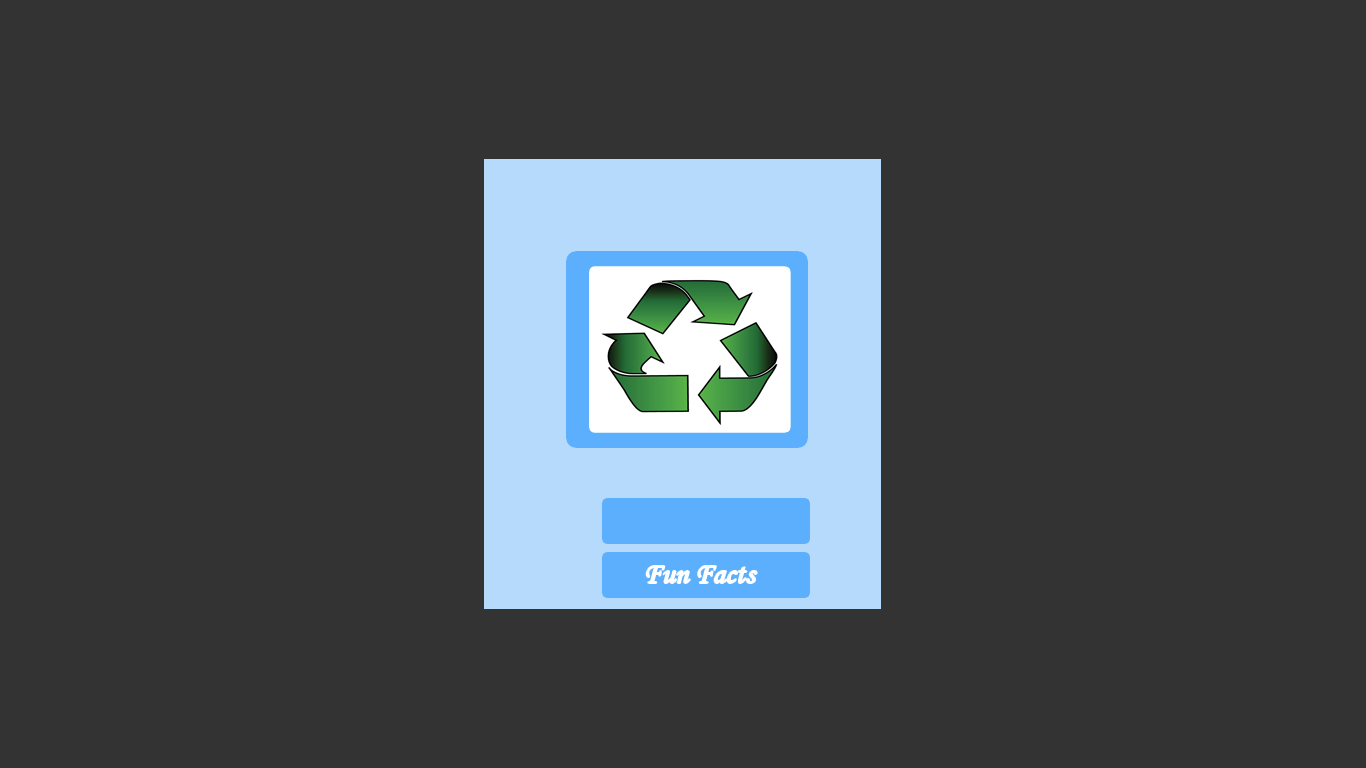
<style>
.page{position:relative;width:1366px;height:768px;background:#333333}
.page>*{position:absolute;margin:0}
.t1{font:30px "MonotypeCorsiva";color:#ffffff}
</style>
<div class="page">
<p class="t1" style="left:646px;top:566px;width:111px;height:17px">Fun Facts</p>
</div>
